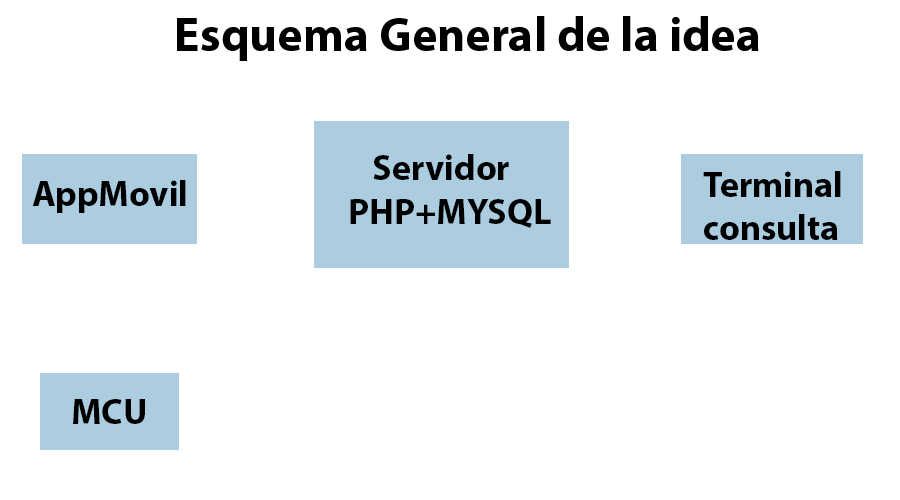
<style>
.page{position:relative;width:900px;height:500px;background:#ffffff}
.page>*{position:absolute;margin:0}
.t1{font:48px "MyriadHebrew-Bold";color:#000000}
.t2{font:36px "MyriadHebrew-Bold";color:#000000}
</style>
<div class="page">
<p class="t1" style="left:177px;top:16px;width:582px;height:45px">Esquema General de la idea</p>
<p class="t2" style="left:373px;top:154px;width:136px;height:26px">Servidor</p>
<p class="t2" style="left:703px;top:171px;width:138px;height:69px;text-align:right">Terminal<br>consulta</p>
<p class="t2" style="left:32px;top:180px;width:154px;height:33px">AppMovil</p>
<p class="t2" style="left:350px;top:199px;width:201px;height:29px">PHP+MYSQL</p>
<p class="t2" style="left:73px;top:399px;width:72px;height:25px">MCU</p>
</div>
